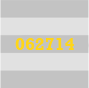
<style>
.page{position:relative;width:89px;height:88px;background:#c3c3c3}
.page>*{position:absolute;margin:0}
.t1{font:18px "Rockwell-Bold";color:#ffd618}
</style>
<div class="page">
<p class="t1" style="left:15px;top:38px;width:59px;height:12px">062714</p>
</div>
